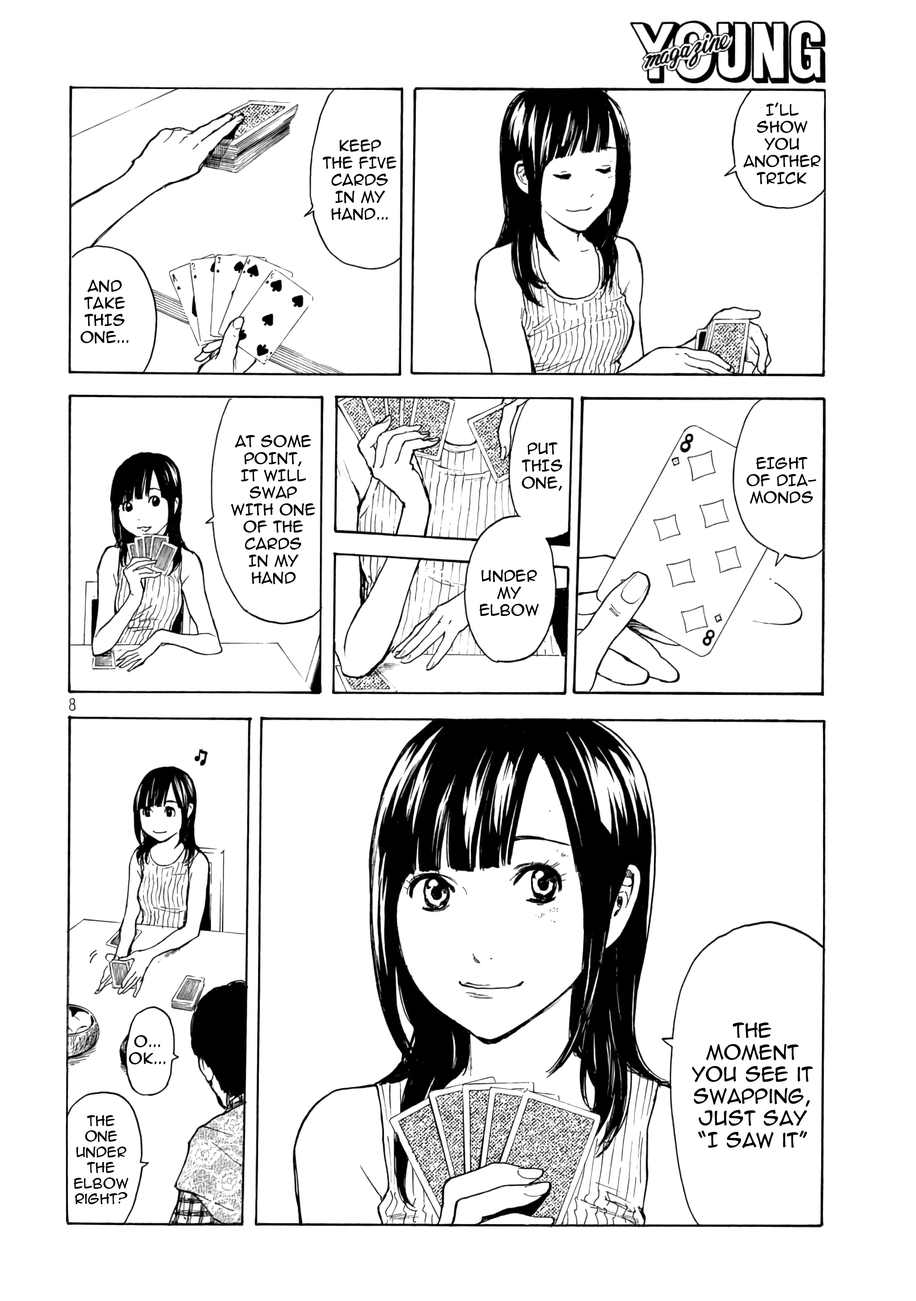
<style>
.page{position:relative;width:916px;height:1301px;background:#ffffff}
.page>*{position:absolute;margin:0}
.t1{font:14.2px "AnimeAce2.0BB";color:#000000;text-transform:uppercase}
.t2{font:18.3px "AnimeAce2.0BB";color:#000000}
.t3{font:14.2px "AnimeAce2.0BB";color:#000000}
.t4{font:13px "AnimeAce2.0BB";color:#000000}
</style>
<div class="page">
<p class="t1" style="left:744px;top:102px;width:77px;height:82px;text-align:center">I'll show you another trick</p>
<p class="t1" style="left:323px;top:139px;width:74px;height:81px;text-align:center">Keep <br>the five cards in my hand...</p>
<p class="t1" style="left:81px;top:280px;width:47px;height:64px;text-align:center">And take this one...</p>
<p class="t1" style="left:231px;top:435px;width:85px;height:149px;text-align:center">At some point, <br>it will swap <br>with one <br>of the <br>cards <br>in my <br>hand</p>
<p class="t1" style="left:522px;top:442px;width:41px;height:49px;text-align:center">Put this one,</p>
<p class="t1" style="left:747px;top:457px;width:70px;height:47px;text-align:center">Eight <br>of dia-<br>monds</p>
<p class="t1" style="left:480px;top:570px;width:59px;height:46px;text-align:center">under my elbow</p>
<p class="t2" style="left:692px;top:1023px;width:121px;height:126px;text-align:center">The <br>moment <br>you see it swapping, just say <br>“I saw it”</p>
<p class="t3" style="left:129px;top:1035px;width:36px;height:29px;text-align:center">O...<br>OK...</p>
<p class="t4" style="left:74px;top:1115px;width:54px;height:89px;text-align:center">The <br>one under the elbow right?</p>
</div>
